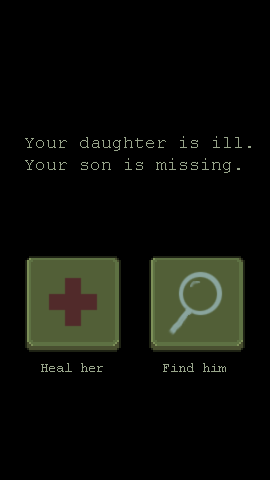
<style>
.page{position:relative;width:270px;height:480px;background:#000000}
.page>*{position:absolute;margin:0}
.t1{font:18px "CourierNewPSMT";color:#98a58b}
.t2{font:14px "CourierNewPSMT";color:#98a58b}
</style>
<div class="page">
<p class="t1" style="left:25px;top:136px;width:226px;height:37px;text-align:right">Your daughter is ill.<br>Your son is missing.</p>
<p class="t2" style="left:41px;top:363px;width:62px;height:9px">Heal her</p>
<p class="t2" style="left:163px;top:363px;width:63px;height:9px">Find him</p>
</div>
